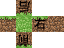
<style>
.page{position:relative;width:64px;height:48px;background:#ffffff}
.page>*{position:absolute;margin:0}
.t1{font:12.5px "SimHei";color:#010002}
</style>
<div class="page">
<p class="t1" style="left:18px;top:0px;width:13px;height:13px;rotate:180deg">后</p>
<p class="t1" style="left:34px;top:17px;width:12px;height:13px">右</p>
<p class="t1" style="left:17px;top:34px;width:13px;height:13px;rotate:180deg">前</p>
</div>
